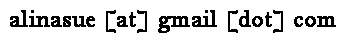
<style>
.page{position:relative;width:344px;height:40px;background:#ffffff}
.page>*{position:absolute;margin:0}
.t1{font:24px "BellMT";color:#000000;font-weight:bold}
</style>
<div class="page">
<p class="t1" style="left:10px;top:10px;width:326px;height:23px">alinasue [at] gmail [dot] com</p>
</div>
